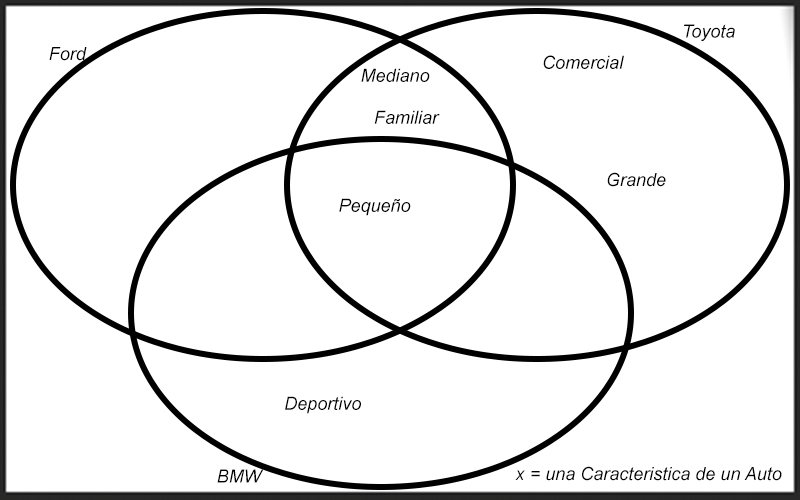
<style>
.page{position:relative;width:800px;height:500px;background:#ffffff}
.page>*{position:absolute;margin:0}
.t1{font:18px "Arial-ItalicMT";color:#000000}
</style>
<div class="page">
<p class="t1" style="left:684px;top:24px;width:51px;height:17px">Toyota</p>
<p class="t1" style="left:49px;top:47px;width:38px;height:14px">Ford</p>
<p class="t1" style="left:543px;top:55px;width:81px;height:14px">Comercial</p>
<p class="t1" style="left:361px;top:68px;width:69px;height:14px">Mediano</p>
<p class="t1" style="left:374px;top:110px;width:66px;height:14px">Familiar</p>
<p class="t1" style="left:607px;top:172px;width:59px;height:15px">Grande</p>
<p class="t1" style="left:339px;top:198px;width:72px;height:18px">Pequeño</p>
<p class="t1" style="left:285px;top:396px;width:76px;height:18px">Deportivo</p>
<p class="t1" style="left:217px;top:469px;width:47px;height:14px">BMW</p>
<p class="t1" style="left:515px;top:466px;width:267px;height:15px">x = una Caracteristica de un Auto</p>
</div>
